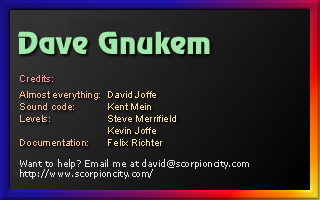
<style>
.page{position:relative;width:320px;height:200px}
.page>*{position:absolute;margin:0}
.t1{font:30px "RevueBT-Regular";color:#9fe9a9}
.t2{font:10px "ArialMT";color:#f794a0}
.t3{font:10px "ArialMT";color:#f7bc94}
.t4{font:10px "ArialMT";color:#f7df94}
.t5{font:9px "Verdana";color:#e2e2e2}
</style>
<div class="page">
<p class="t1" style="left:18px;top:31px;width:192px;height:23px">Dave Gnukem</p>
<p class="t2" style="left:20px;top:75px;width:33px;height:7px">Credits:</p>
<p class="t3" style="left:19px;top:91px;width:81px;height:55px">Almost everything:<br>Sound code:<br>Levels:<br><br>Documentation:</p>
<p class="t4" style="left:108px;top:91px;width:68px;height:55px">David Joffe<br>Kent Mein<br>Steve Merrifield<br>Kevin Joffe<br>Felix Richter</p>
<p class="t5" style="left:20px;top:159px;width:229px;height:20px">Want to help? Email me at david@scorpioncity.com<br>http://www.scorpioncity.com/</p>
</div>
